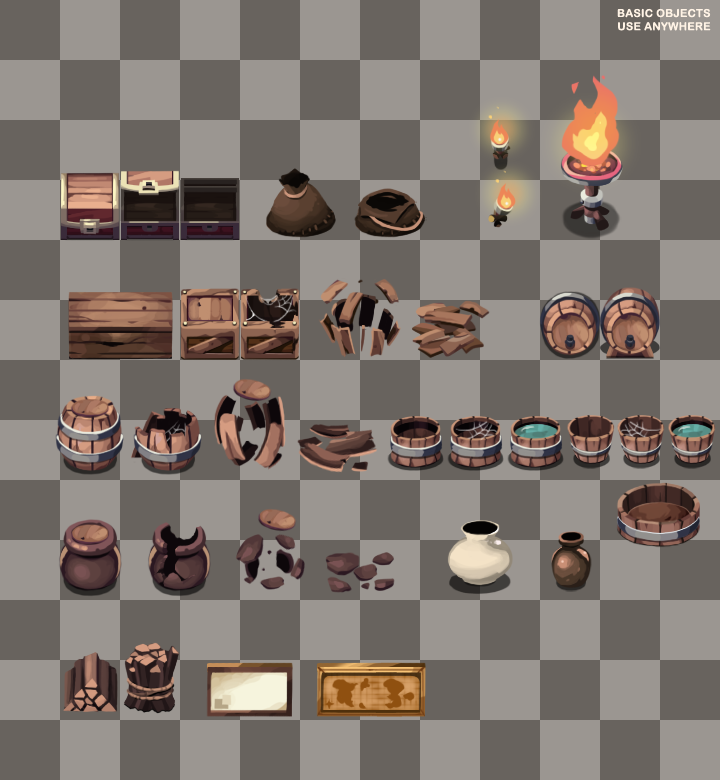
<style>
.page{position:relative;width:720px;height:780px;background:#9b9691}
.page>*{position:absolute;margin:0}
.t1{font:11px "ArialRoundedMTBold";letter-spacing:0.025em;color:#fff3e5}
</style>
<div class="page">
<p class="t1" style="left:617px;top:8px;width:94px;height:23px;text-align:right">BASIC OBJECTS<br>USE ANYWHERE</p>
</div>
